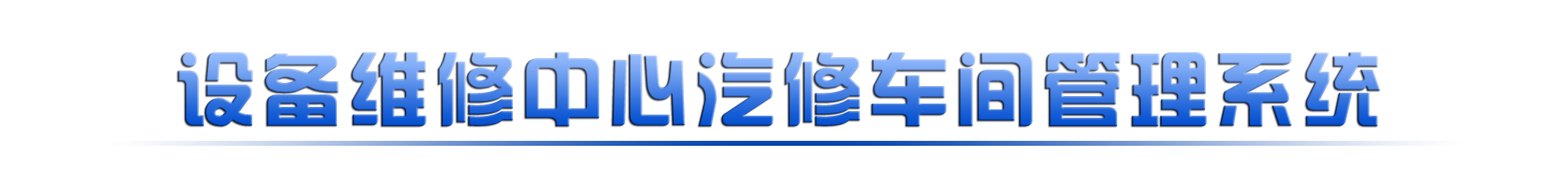
<style>
.page{position:relative;width:1568px;height:169px;background:#ffffff}
.page>*{position:absolute;margin:0}
.t1{font:78.8px "FZHZGBJW--GB1-0";letter-spacing:0.1em}
</style>
<div class="page">
<p class="t1" style="left:178px;top:52px;width:1202px;height:75px">设备维修中心汽修车间管理系统</p>
</div>
